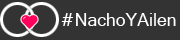
<style>
.page{position:relative;width:180px;height:40px;background:#333333}
.page>*{position:absolute;margin:0}
.t1{font:19px "Gautami";color:#ffffff}
</style>
<div class="page">
<p class="t1" style="left:61px;top:13px;width:115px;height:13px">#NachoYAilen</p>
</div>
